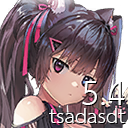
<style>
.page{position:relative;width:128px;height:128px}
.page>*{position:absolute;margin:0}
.t1{font:30px/18px "THSarabunNew";color:#ffffff}
.t2{font:50px "THSarabunNew";color:#ffffff}
</style>
<div class="page">
<p class="t1" style="left:49px;top:81px;width:76px;height:42px;text-align:right"><span class="t2">5.4<br></span>tsadasdt</p>
</div>
